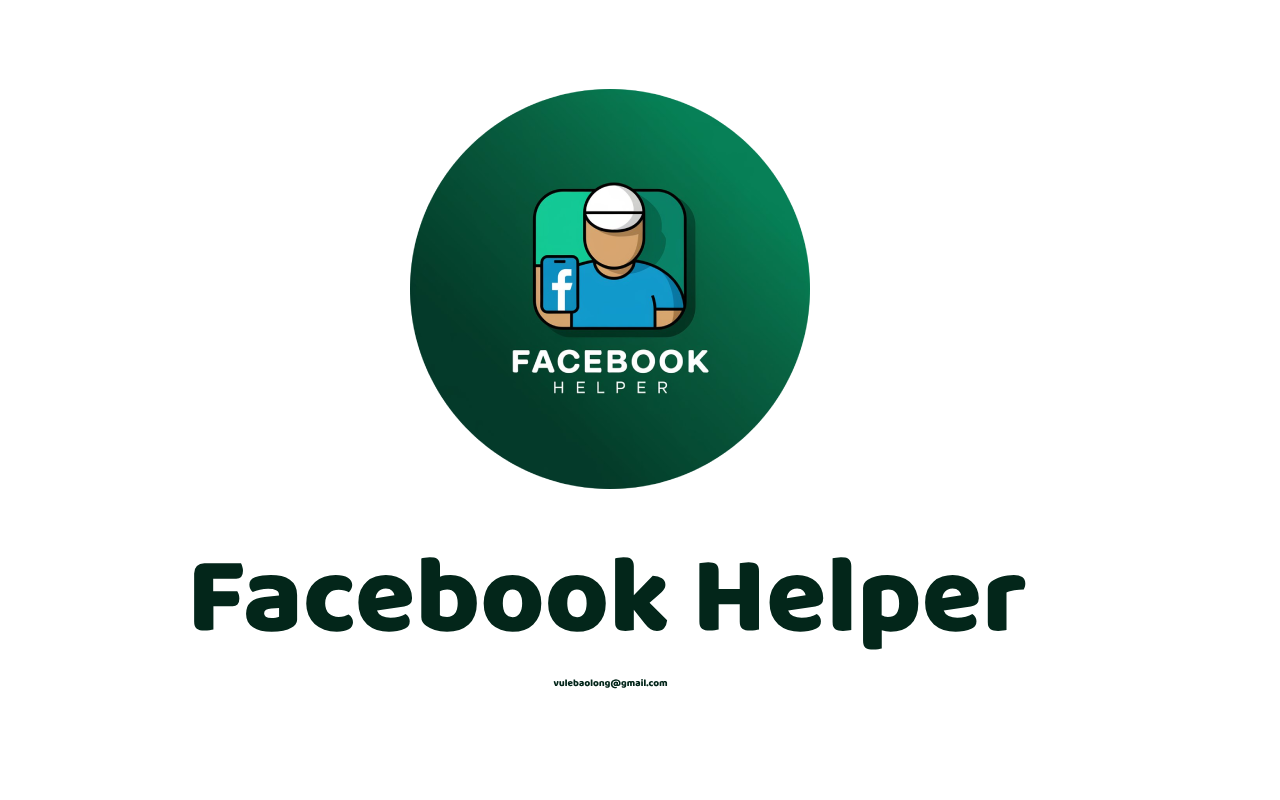
<style>
.page{position:relative;width:1280px;height:800px;background:#ffffff}
.page>*{position:absolute;margin:0}
.t1{font:110px "Baloo";color:#03261a}
.t2{font:10px "Baloo";color:#03261a}
</style>
<div class="page">
<p class="t1" style="left:194px;top:557px;width:832px;height:93px">Facebook Helper</p>
<p class="t2" style="left:553px;top:678px;width:115px;height:11px">vulebaolong@gmail.com</p>
</div>
